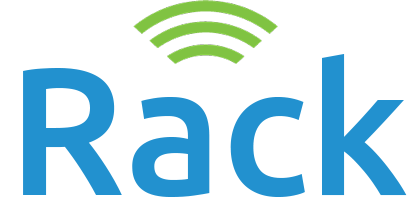
<style>
.page{position:relative;width:416px;height:212px;background:#ffffff}
.page>*{position:absolute;margin:0}
.t1{font:182px "Ubuntu-Medium";color:#2291cf}
</style>
<div class="page">
<p class="t1" style="left:23px;top:54px;width:384px;height:143px">Rack</p>
</div>
